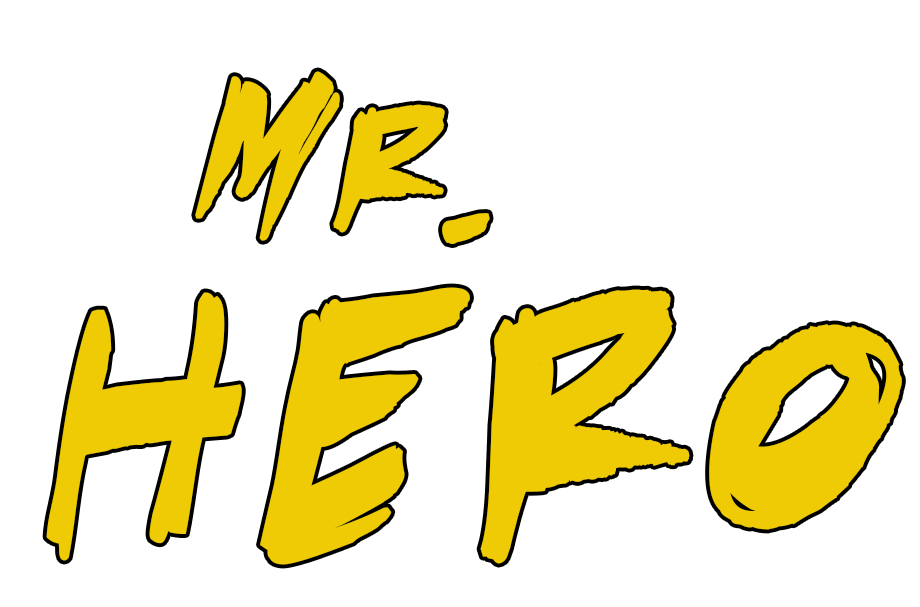
<style>
.page{position:relative;width:920px;height:607px;background:#ffffff}
.page>*{position:absolute;margin:0}
.t1{font:214.7px "DeathRattleBB";color:#efcb05;font-weight:bold}
.t2{font:429.7px "DeathRattleBB";color:#efcb05;font-weight:bold}
</style>
<div class="page">
<p class="t1" style="left:195px;top:71px;width:295px;height:173px;rotate:8deg">mr.</p>
<p class="t2" style="left:46px;top:287px;width:856px;height:278px">hero</p>
</div>
